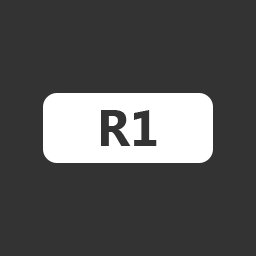
<style>
.page{position:relative;width:256px;height:256px;background:#333333}
.page>*{position:absolute;margin:0}
.t1{font:50px "MicrosoftNewTaiLue-Bold";color:#333333}
</style>
<div class="page">
<p class="t1" style="left:101px;top:110px;width:56px;height:36px">R1</p>
</div>
